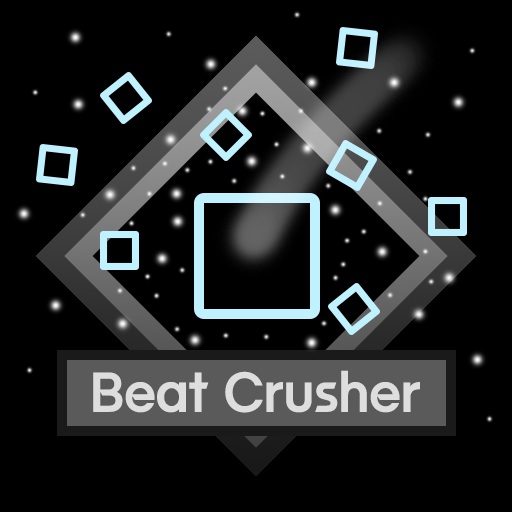
<style>
.page{position:relative;width:512px;height:512px;background:#000000}
.page>*{position:absolute;margin:0}
.t1{font:50px "yspotlight-regular";color:#dedede}
</style>
<div class="page">
<p class="t1" style="left:93px;top:370px;width:327px;height:43px">Beat Crusher</p>
</div>
